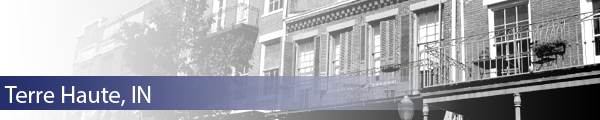
<style>
.page{position:relative;width:600px;height:120px}
.page>*{position:absolute;margin:0}
.t1{font:24px "MyriadPro-Regular";letter-spacing:0.01em;color:#ffffff}
</style>
<div class="page">
<p class="t1" style="left:4px;top:86px;width:147px;height:21px">Terre Haute, IN</p>
</div>
